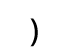
<style>
.page{position:relative;width:70px;height:55px;background:#ffffff}
.page>*{position:absolute;margin:0}
.t1{font:31.8px "DroidSans";color:#000000}
</style>
<div class="page">
<p class="t1" style="left:30px;top:18px;width:8px;height:29px">)</p>
</div>
